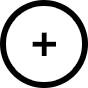
<style>
.page{position:relative;width:88px;height:88px;background:#ffffff}
.page>*{position:absolute;margin:0}
.t1{font:44px "Menlo-Bold";color:#000000}
</style>
<div class="page">
<p class="t1" style="left:32px;top:32px;width:24px;height:24px">+</p>
</div>
